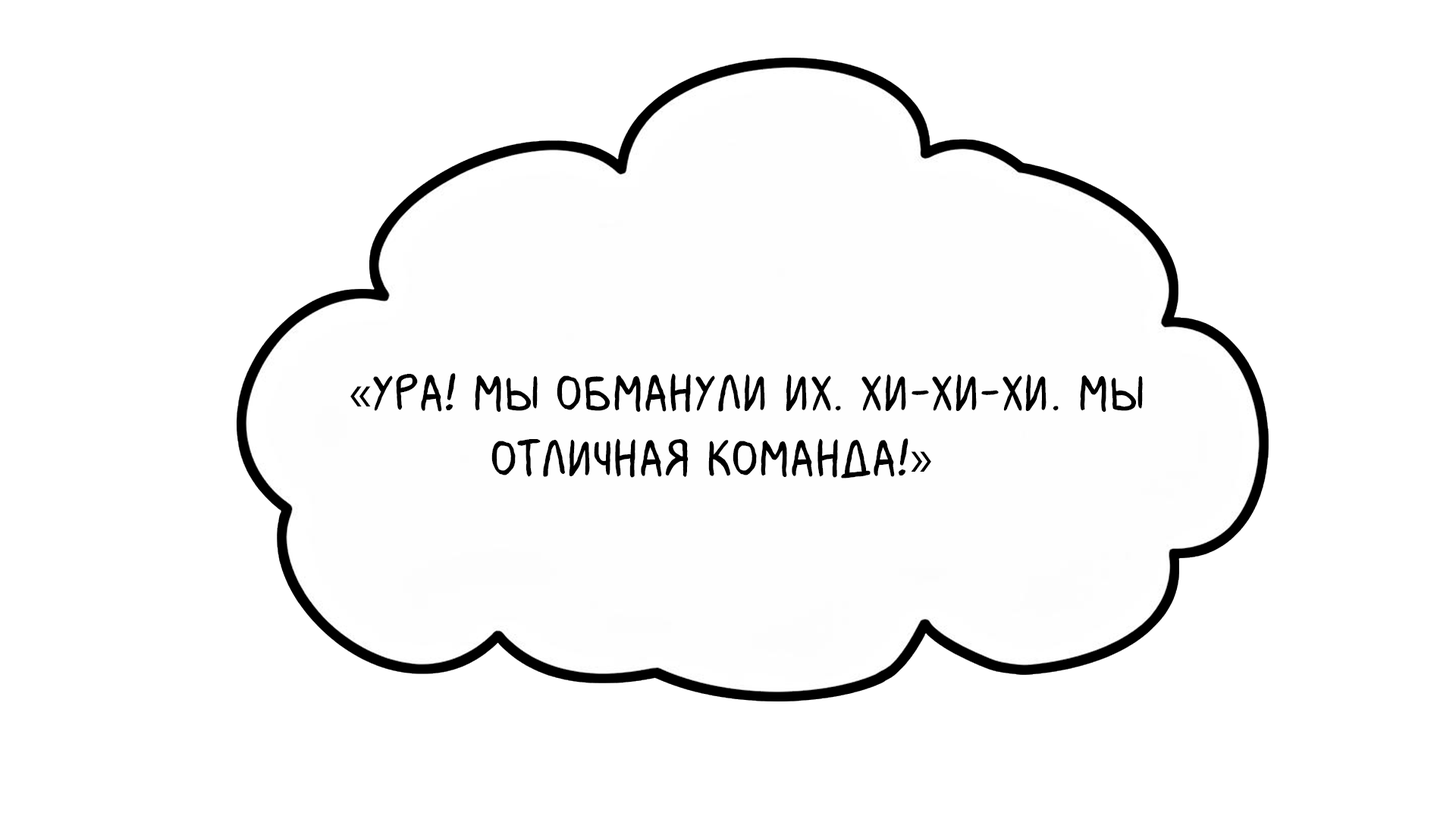
<style>
.page{position:relative;width:1456px;height:819px;background:#ffffff}
.page>*{position:absolute;margin:0}
.t1{font:54.6px "MilkMustacheBB";color:#000000}
.t2{font:54.6px "MyriadPro-Regular";color:#000000}
</style>
<div class="page">
<p class="t1" style="left:350px;top:373px;width:793px;height:106px"><span class="t2">«</span>Ура! Мы обманули их. Хи-хи-хи. Мы <br>          отличная команда!<span class="t2">»</span></p>
</div>
